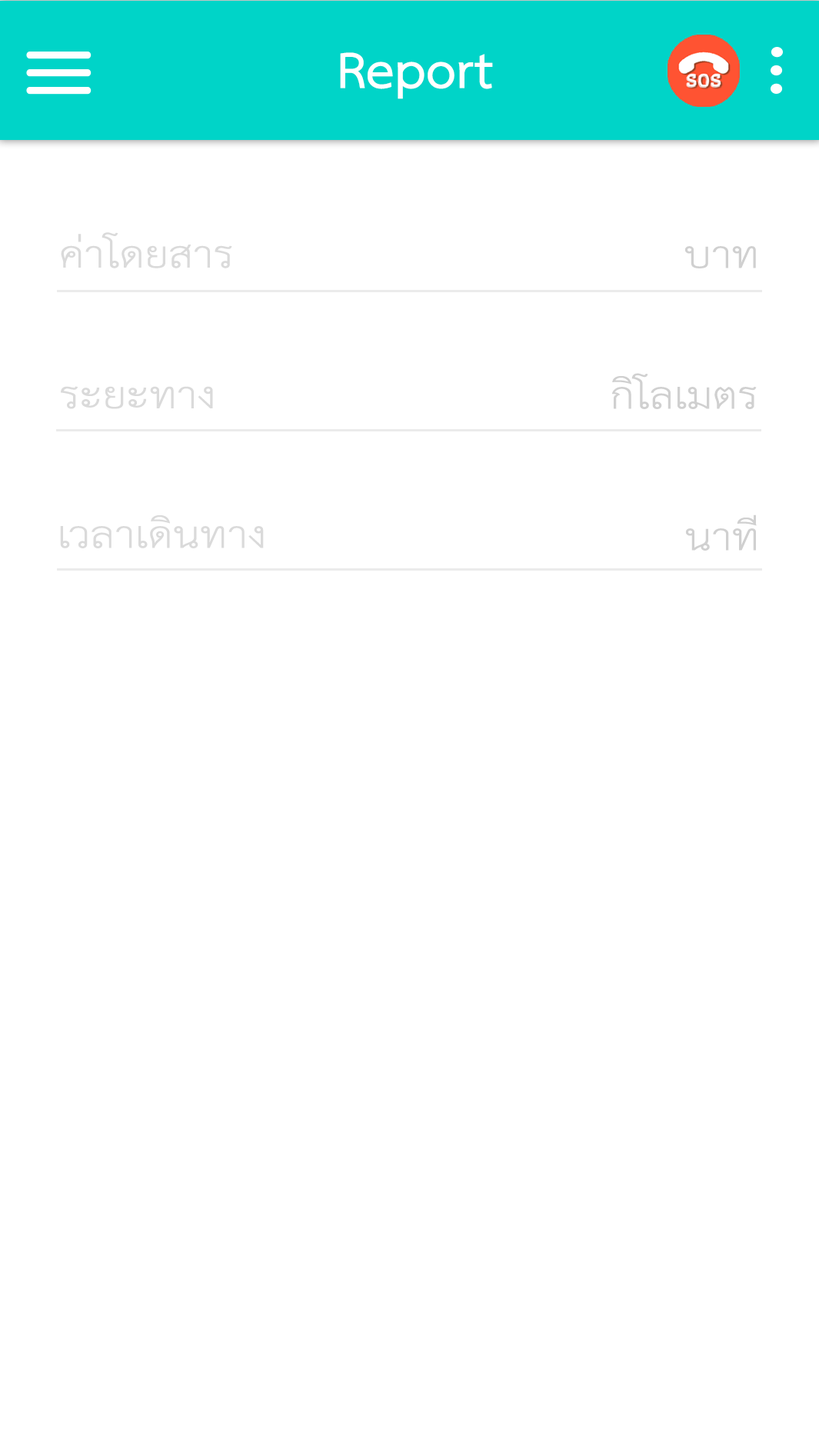
<style>
.page{position:relative;width:819px;height:1455px;background:#ffffff}
.page>*{position:absolute;margin:0}
.t1{font:73.4px "THSarabunPSK-Bold";color:#ffffff}
.t2{font:53.9px "THSarabunPSK";color:#dadada;scale:1.19 1}
.t3{font:53.9px "THSarabunPSK";color:#d0d0d0;scale:1.19 1}
</style>
<div class="page">
<p class="t1" style="left:340px;top:52px;width:153px;height:47px">Report</p>
<p class="t2" style="left:61px;top:232px;width:171px;height:36px">ค่าโดยสาร</p>
<p class="t3" style="left:685px;top:246px;width:71px;height:22px">บาท</p>
<p class="t3" style="left:612px;top:373px;width:145px;height:36px">กิโลเมตร</p>
<p class="t2" style="left:61px;top:386px;width:152px;height:23px">ระยะทาง</p>
<p class="t2" style="left:60px;top:515px;width:204px;height:33px">เวลาเดินทาง</p>
<p class="t3" style="left:685px;top:515px;width:72px;height:36px">นาที</p>
</div>
